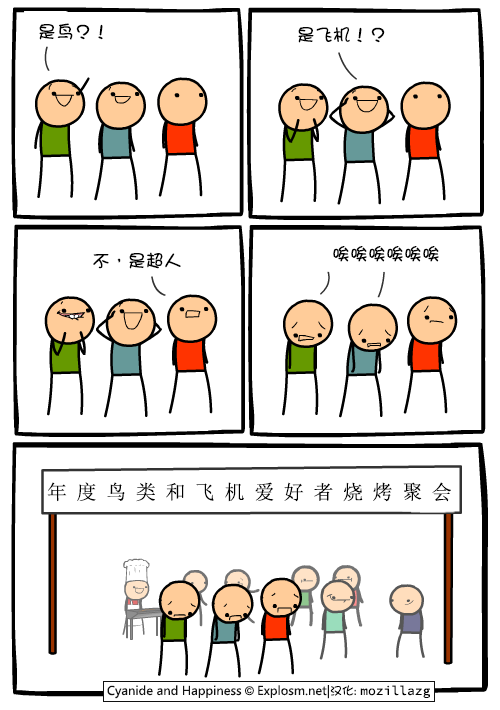
<style>
.page{position:relative;width:500px;height:710px;background:#ffffff}
.page>*{position:absolute;margin:0}
.t1{font:18px "DFGirl";color:#000000}
.t2{font:20px "SimSun";letter-spacing:0.48em;color:#000000}
</style>
<div class="page">
<p class="t1" style="left:39px;top:23px;width:64px;height:17px">是鸟？！</p>
<p class="t1" style="left:298px;top:27px;width:87px;height:16px">是飞机！？</p>
<p class="t1" style="left:333px;top:246px;width:106px;height:16px">唉唉唉唉唉唉</p>
<p class="t1" style="left:93px;top:252px;width:88px;height:17px">不，是超人</p>
<p class="t2" style="left:47px;top:482px;width:404px;height:20px">年度鸟类和飞机爱好者烧烤聚会</p>
</div>
